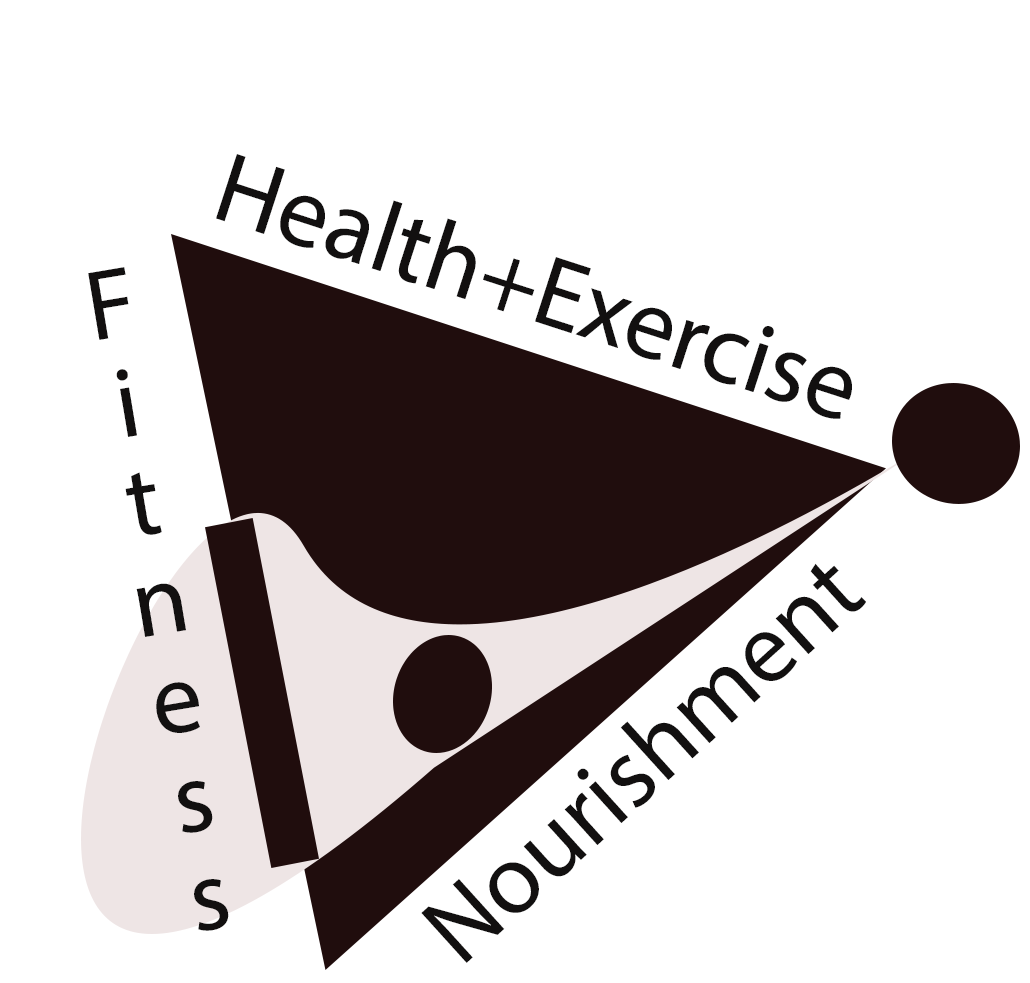
<style>
.page{position:relative;width:1030px;height:983px;background:#ffffff}
.page>*{position:absolute;margin:0}
.t1{font:100px "MyriadPro-Regular";color:#121010}
.t2{font:12px "MyriadPro-Regular";color:#121010}
</style>
<div class="page">
<p class="t1" style="left:216px;top:154px;width:636px;height:265px;rotate:18deg">Health+Exercise</p>
<p class="t1" style="left:88px;top:267px;width:141px;height:664px;rotate:-10deg"><span class="t2"><br></span>Fitness</p>
<p class="t1" style="left:421px;top:563px;width:445px;height:400px;rotate:-42deg">Nourishment</p>
</div>
